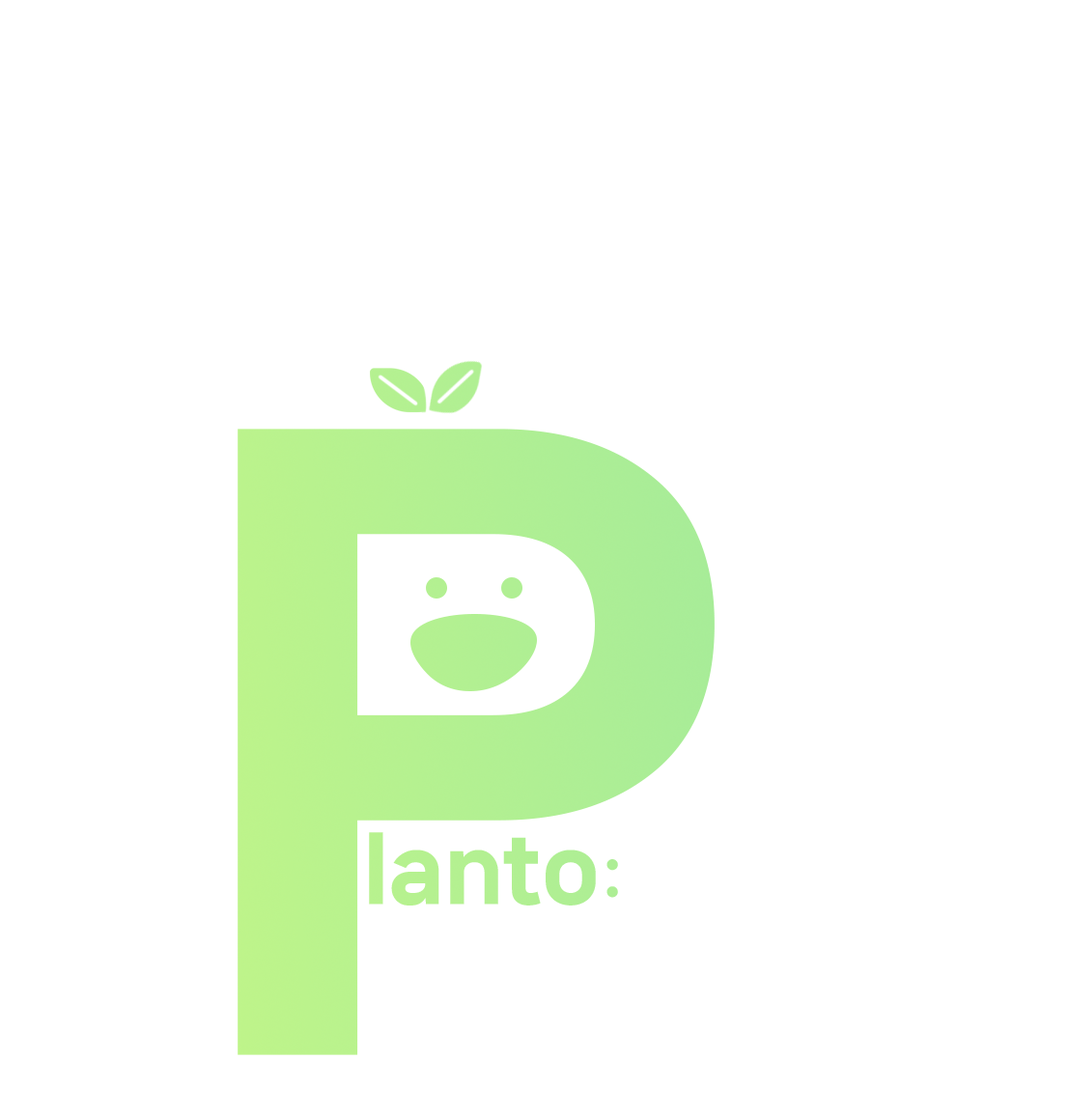
<style>
.page{position:relative;width:1070px;height:1115px;background:#ffffff}
.page>*{position:absolute;margin:0}
.t1{font:761.2px "NanumSquareNeoTTF-eHv";color:#b6f18f}
.t2{font:87.2px "NanumSquareNeoTTF-eHv";color:#b3f091}
.t3{font:57.9px "NanumSquareNeoTTF-eHv";color:#adee95}
</style>
<div class="page">
<p class="t1" style="left:237px;top:429px;width:477px;height:626px">P</p>
<p class="t2" style="left:369px;top:832px;width:227px;height:73px">lanto</p>
<p class="t3" style="left:606px;top:859px;width:12px;height:39px">:</p>
</div>
